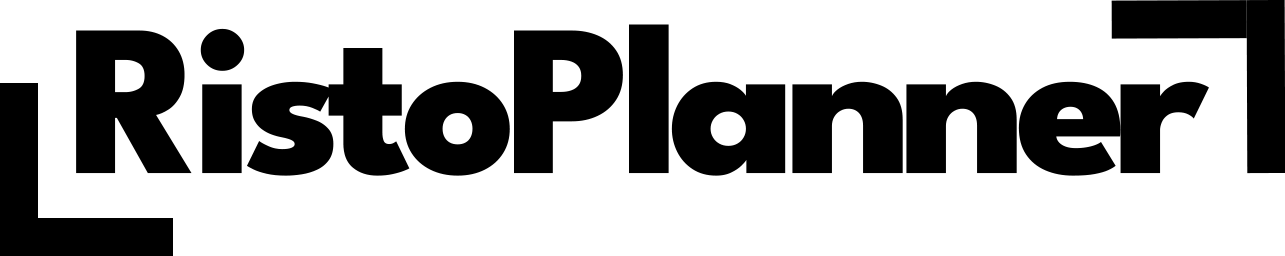
<style>
.page{position:relative;width:1285px;height:256px;background:#ffffff}
.page>*{position:absolute;margin:0}
.t1{font:215.8px "LeagueSpartan-ExtraBold";letter-spacing:-0.05em;color:#000000;scale:1.03 1}
</style>
<div class="page">
<p class="t1" style="left:76px;top:24px;width:1133px;height:152px">RistoPlanner</p>
</div>
